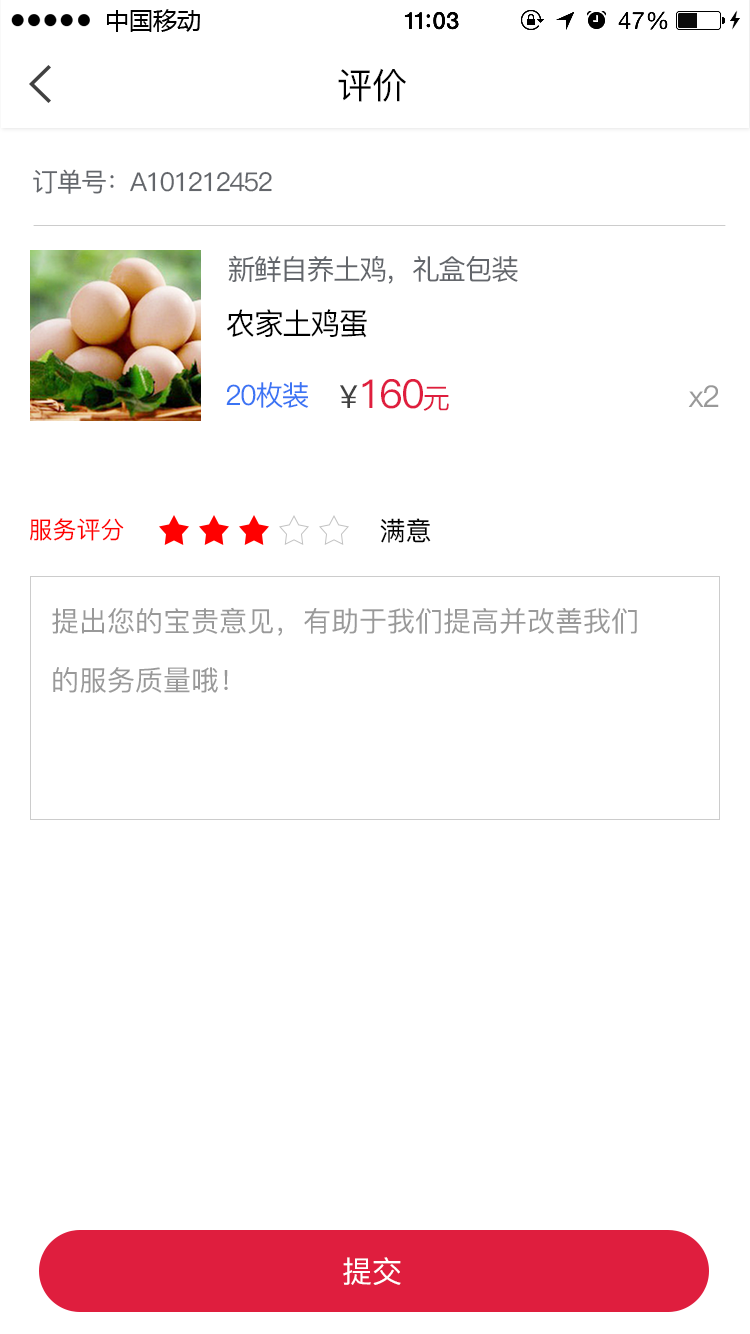
<style>
.page{position:relative;width:750px;height:1334px;background:#ffffff}
.page>*{position:absolute;margin:0}
.t1{font:35.7px "PingFang-SC-Medium";color:#000000}
.t2{font:26px "PingFang-SC-Medium";letter-spacing:-0.06em;color:#63666b}
.t3{font:28px "PingFang-SC-Medium";letter-spacing:-0.06em;color:#63666b}
.t4{font:30px "PingFang-SC-Medium";letter-spacing:-0.06em;color:#000000}
.t5{font:28px "PingFang-SC-Medium";letter-spacing:-0.06em;color:#3b74f4}
.t6{font:40px "PingFang-SC-Medium";letter-spacing:-0.06em;color:#df1e3e}
.t7{font:32px "PingFang-SC-Medium";color:#414141}
.t8{font:28px "PingFang-SC-Medium";letter-spacing:-0.06em;color:#df1e3e}
.t9{font:30px "PingFang-SC-Medium";letter-spacing:-0.06em;color:#999999}
.t10{font:24px "PingFang-SC-Medium";color:#ff0000}
.t11{font:26px "PingFang-SC-Medium";color:#000000}
.t12{font:28px/58.7px "PingFang-SC-Medium";color:#999999}
.t13{font:30px "PingFang-SC-Medium";color:#ffffff}
</style>
<div class="page">
<p class="t1" style="left:338px;top:68px;width:68px;height:34px">评价</p>
<p class="t2" style="left:33px;top:169px;width:239px;height:25px">订单号：A101212452</p>
<p class="t3" style="left:228px;top:255px;width:290px;height:29px">新鲜自养土鸡，礼盒包装</p>
<p class="t4" style="left:227px;top:309px;width:140px;height:29px">农家土鸡蛋</p>
<p class="t5" style="left:226px;top:382px;width:83px;height:26px">20枚装</p>
<p class="t6" style="left:340px;top:379px;width:109px;height:32px"><span class="t7">¥</span>160<span class="t8">元</span></p>
<p class="t9" style="left:688px;top:385px;width:31px;height:22px">x2</p>
<p class="t10" style="left:30px;top:518px;width:94px;height:23px">服务评分</p>
<p class="t11" style="left:380px;top:518px;width:51px;height:25px">满意</p>
<p class="t12" style="left:52px;top:607px;width:585px;height:86px">提出您的宝贵意见，有助于我们提高并改善我们<br>的服务质量哦！</p>
<p class="t13" style="left:343px;top:1257px;width:58px;height:28px">提交</p>
</div>
